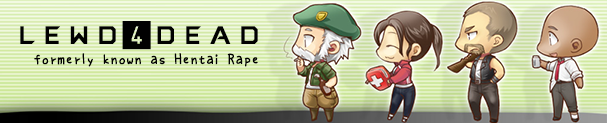
<style>
.page{position:relative;width:607px;height:123px}
.page>*{position:absolute;margin:0}
.t1{font:28px "AMDRTG";color:#010101}
.t2{font:16px "SNsanafonmaruP";color:#010101}
</style>
<div class="page">
<p class="t1" style="left:20px;top:21px;width:238px;height:29px">lewd4dead</p>
<p class="t2" style="left:34px;top:53px;width:224px;height:14px">formerly known as Hentai Rape</p>
</div>
